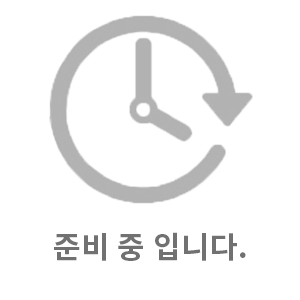
<style>
.page{position:relative;width:300px;height:300px;background:#ffffff}
.page>*{position:absolute;margin:0}
.t1{font:30px "NotoSansKR-Bold";letter-spacing:0.025em;color:#717171}
</style>
<div class="page">
<p class="t1" style="left:54px;top:232px;width:192px;height:29px">준비 중 입니다.</p>
</div>
